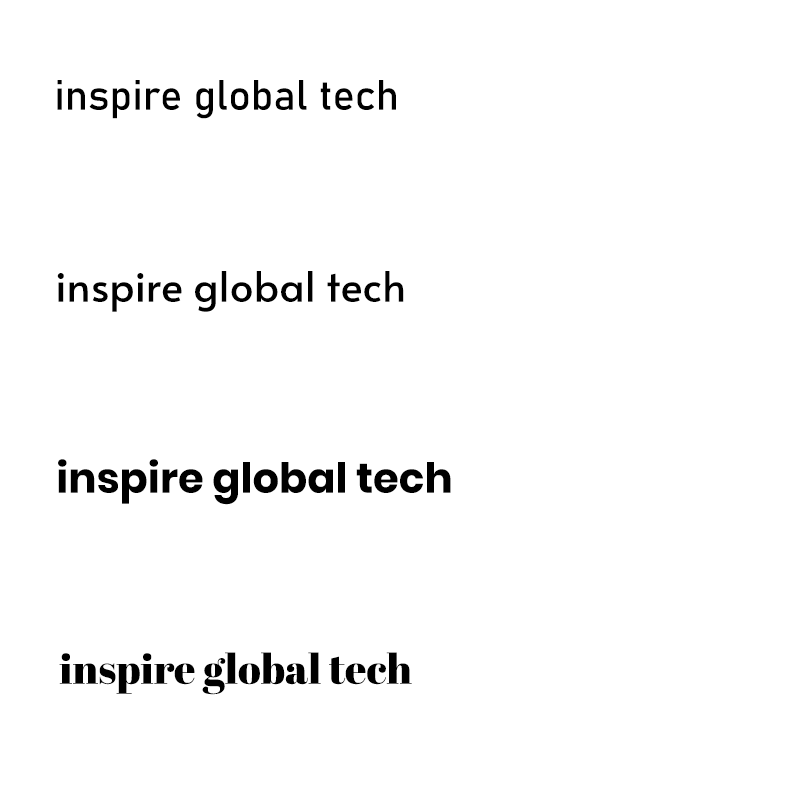
<style>
.page{position:relative;width:800px;height:800px;background:#ffffff}
.page>*{position:absolute;margin:0}
.t1{font:41.7px "Bahnschrift";color:#000000}
.t2{font:41.7px "Alata-Regular";color:#000000}
.t3{font:41.7px "Poppins-Bold";color:#000000}
.t4{font:41.7px "AbrilFatface-Regular";color:#000000}
</style>
<div class="page">
<p class="t1" style="left:57px;top:80px;width:339px;height:39px">inspire global tech</p>
<p class="t2" style="left:57px;top:271px;width:347px;height:41px">inspire global tech</p>
<p class="t3" style="left:58px;top:459px;width:393px;height:46px">inspire global tech</p>
<p class="t4" style="left:59px;top:652px;width:353px;height:43px">inspire global tech</p>
</div>
